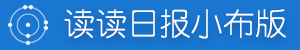
<style>
.page{position:relative;width:300px;height:50px;background:#1977d2}
.page>*{position:absolute;margin:0}
.t1{font:32px "YouYuan";color:#ffffff}
</style>
<div class="page">
<p class="t1" style="left:64px;top:9px;width:222px;height:30px">读读日报小布版</p>
</div>
